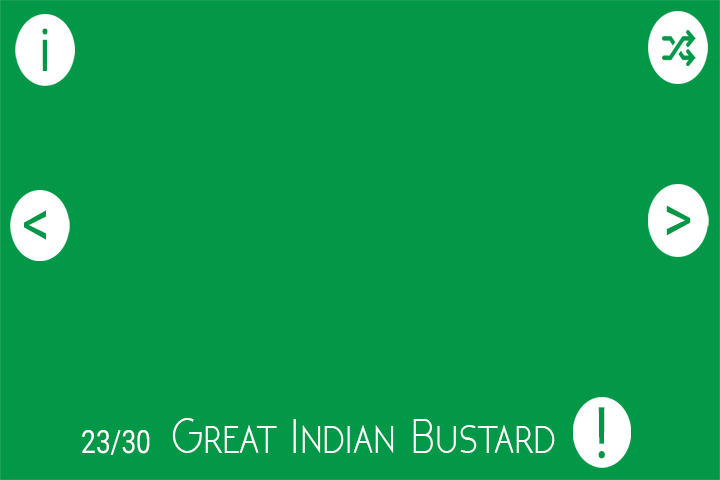
<style>
.page{position:relative;width:720px;height:480px;background:#029848}
.page>*{position:absolute;margin:0}
.t1{font:59.1px "Roboto-Regular";color:#029848;scale:0.83 1}
.t2{font:68.2px "Roboto-Regular";color:#029848;scale:0.82 1}
.t3{font:66.5px "Roboto-Regular";color:#029848;scale:0.83 1}
.t4{font:71.5px "Roboto-Regular";color:#029848;scale:0.83 1}
.t5{font:52px "NEOTERIC";color:#ffffff;scale:0.83 1}
.t6{font:32px "Roboto-Regular";color:#ffffff;scale:0.82 1}
</style>
<div class="page">
<p class="t1" style="left:42px;top:28px;width:6px;height:43px">i</p>
<p class="t2" style="left:666px;top:205px;width:25px;height:31px">&gt;</p>
<p class="t3" style="left:24px;top:210px;width:22px;height:30px">&lt;</p>
<p class="t4" style="left:598px;top:407px;width:7px;height:52px">!</p>
<p class="t5" style="left:172px;top:418px;width:383px;height:35px">Great Indian Bustard</p>
<p class="t6" style="left:82px;top:430px;width:68px;height:25px">23/30</p>
</div>
